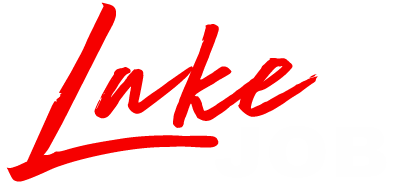
<style>
.page{position:relative;width:398px;height:184px;background:#ffffff}
.page>*{position:absolute;margin:0}
.t1{font:197.3px "Brat";letter-spacing:0.025em;color:#f60000;scale:0.96 1}
</style>
<div class="page">
<p class="t1" style="left:6px;top:2px;width:312px;height:180px">Lake</p>
</div>
